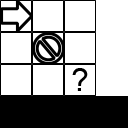
<style>
.page{position:relative;width:128px;height:128px;background:#ffffff}
.page>*{position:absolute;margin:0}
.t1{font:32px "ArialMT";color:#000000}
</style>
<div class="page">
<p class="t1" style="left:72px;top:68px;width:16px;height:23px">?</p>
</div>
